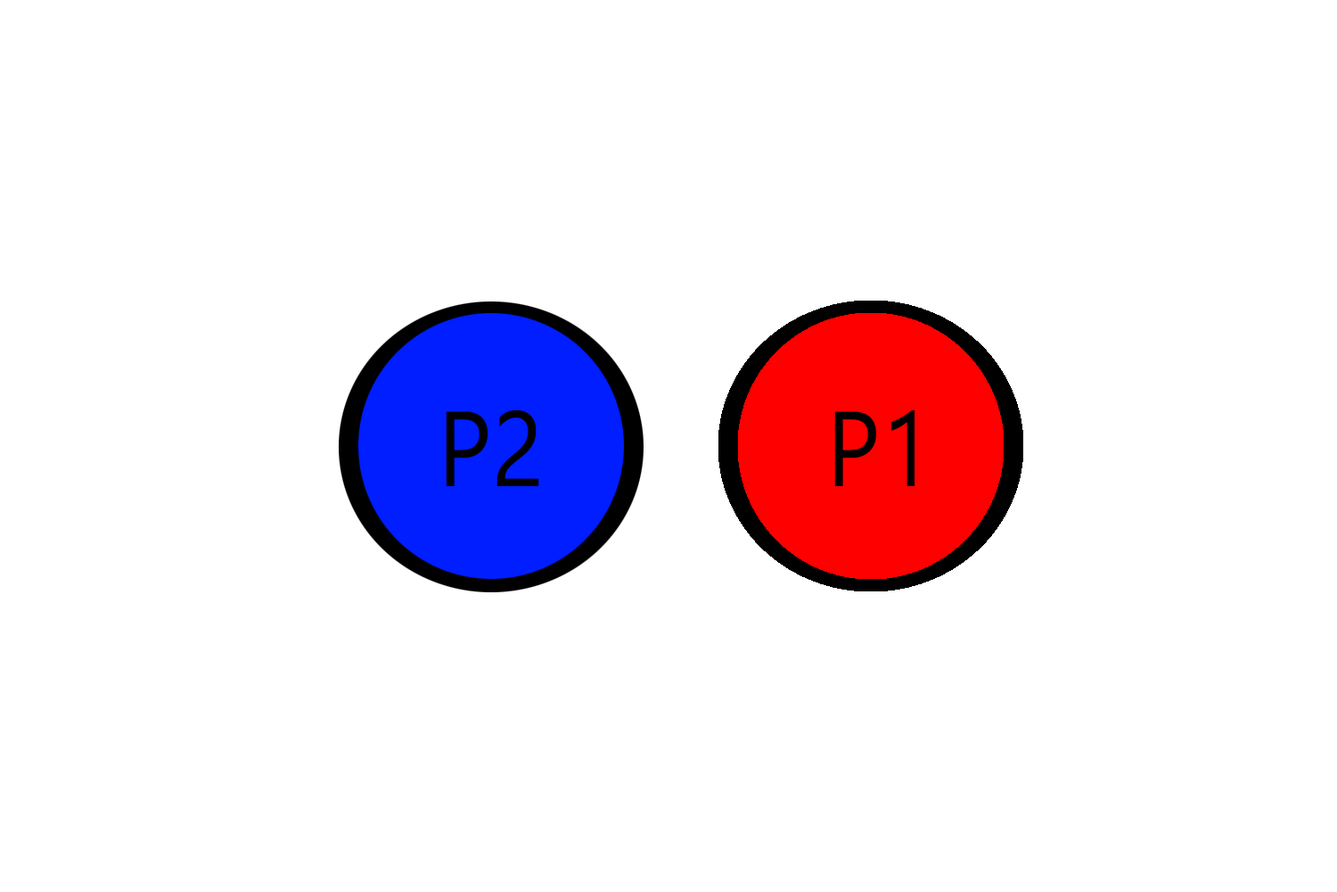
<style>
.page{position:relative;width:1337px;height:892px;background:#ffffff}
.page>*{position:absolute;margin:0}
.t1{font:106.3px "LeelawadeeUI";color:#000000;scale:0.9 1}
</style>
<div class="page">
<p class="t1" style="left:446px;top:410px;width:93px;height:76px">P2</p>
<p class="t1" style="left:835px;top:409px;width:80px;height:77px">P1</p>
</div>
